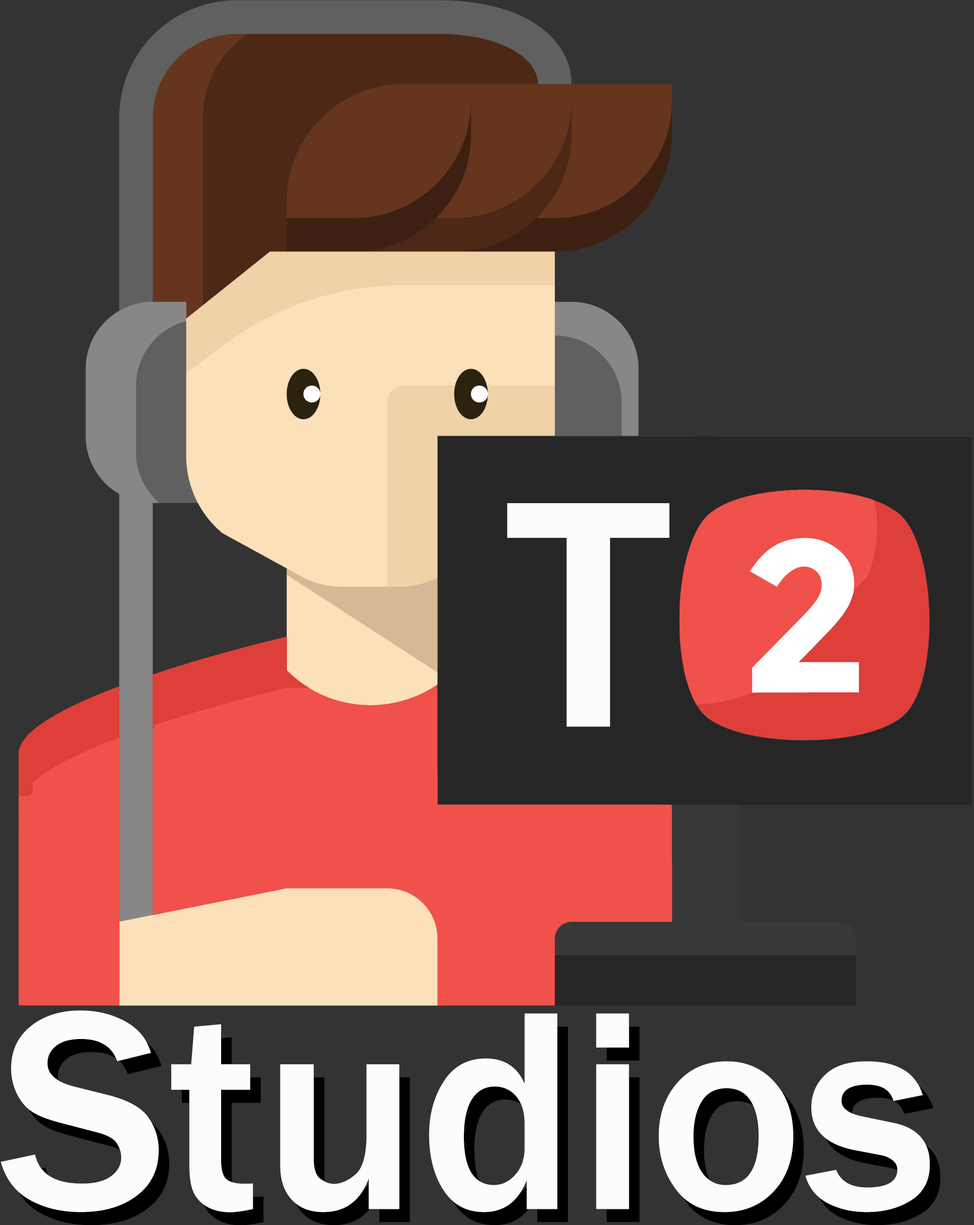
<style>
.page{position:relative;width:974px;height:1225px;background:#333333}
.page>*{position:absolute;margin:0}
.t1{font:335px "FranklinGothic-Medium";color:#fcfcfc}
.t2{font:293.1px "FranklinGothic-Medium";color:#fcfcfc}
</style>
<div class="page">
<p class="t1" style="left:507px;top:503px;width:162px;height:224px">T</p>
<p class="t2" style="left:1px;top:1010px;width:929px;height:202px">Studios</p>
</div>
